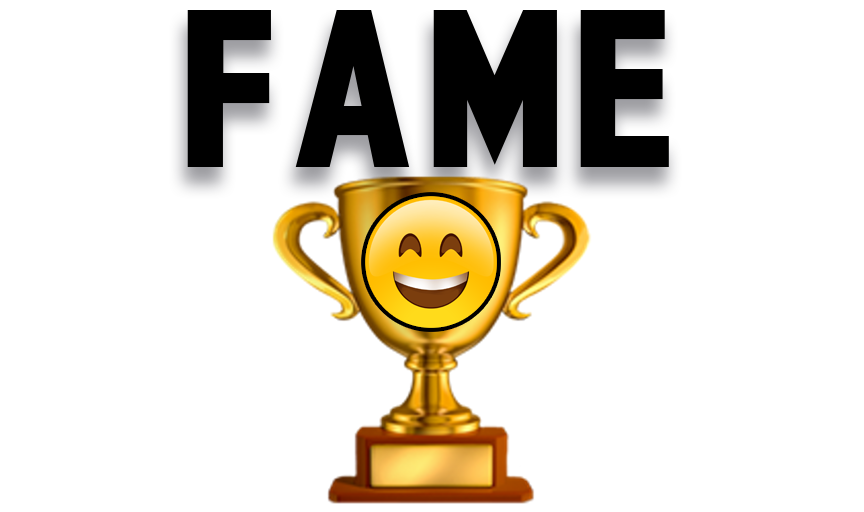
<style>
.page{position:relative;width:864px;height:512px;background:#ffffff}
.page>*{position:absolute;margin:0}
.t1{font:196.3px "WagnerZip-Change";letter-spacing:0.025em;color:#000000}
</style>
<div class="page">
<p class="t1" style="left:187px;top:10px;width:482px;height:157px">FAME</p>
</div>
